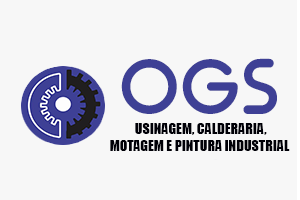
<style>
.page{position:relative;width:300px;height:200px;background:#f7f7f7}
.page>*{position:absolute;margin:0}
.t1{font:72px "TypoRoundBoldDemo";color:#3e4095}
.t2{font:14px "Impact";color:#000007}
</style>
<div class="page">
<p class="t1" style="left:121px;top:58px;width:156px;height:56px">OGS</p>
<p class="t2" style="left:110px;top:123px;width:180px;height:28px;text-align:center">USINAGEM, CALDERARIA,<br>MOTAGEM E PINTURA INDUSTRIAL</p>
</div>
